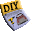
<style>
.page{position:relative;width:32px;height:32px;background:#ffffff}
.page>*{position:absolute;margin:0}
.t1{font:9.6px "CalifornianFB-Reg";color:#000000;font-weight:bold}
</style>
<div class="page">
<p class="t1" style="left:2px;top:1px;width:17px;height:12px;rotate:-12deg">DIY</p>
</div>
